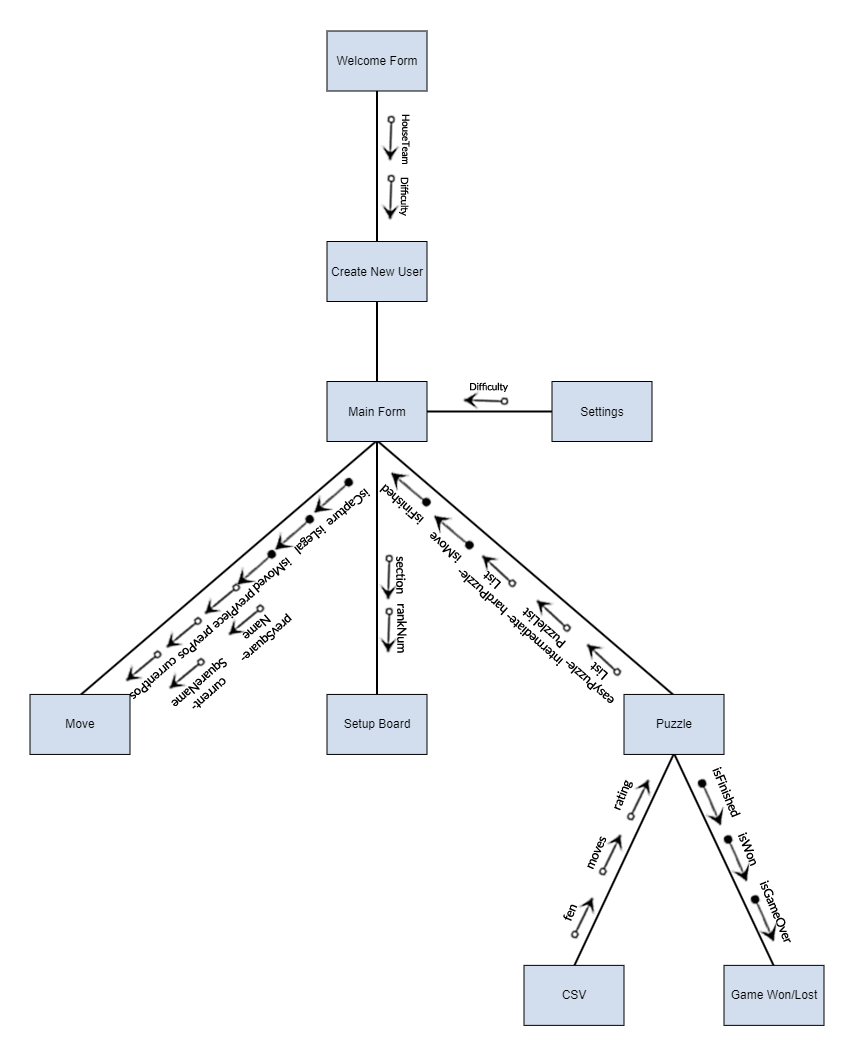
<style>
.page{position:relative;width:854px;height:1055px;background:#ffffff}
.page>*{position:absolute;margin:0}
.t1{font:10px "Lato-Regular";letter-spacing:-0.025em;color:#000000}
.t2{font:12.6px "Lato-Regular";letter-spacing:-0.025em;color:#000000}
</style>
<div class="page">
<p class="t1" style="left:402px;top:114px;width:8px;height:50px;rotate:90deg">HouseTeam</p>
<p class="t1" style="left:399px;top:177px;width:10px;height:39px;rotate:90deg">Difficulty</p>
<p class="t1" style="left:470px;top:382px;width:38px;height:10px">Difficulty</p>
<p class="t2" style="left:379px;top:484px;width:45px;height:41px;rotate:-139deg">isFinished</p>
<p class="t2" style="left:326px;top:488px;width:44px;height:37px;rotate:140deg">isCapture</p>
<p class="t2" style="left:294px;top:525px;width:32px;height:30px;rotate:140deg">isLegal</p>
<p class="t2" style="left:430px;top:532px;width:32px;height:31px;rotate:-139deg">isMove</p>
<p class="t2" style="left:252px;top:557px;width:40px;height:36px;rotate:140deg">isMoved</p>
<p class="t2" style="left:396px;top:556px;width:10px;height:38px;rotate:90deg">section</p>
<p class="t2" style="left:458px;top:570px;width:50px;height:46px;text-align:center;rotate:-139deg">hardPuzzle-<br>List</p>
<p class="t2" style="left:212px;top:588px;width:44px;height:40px;rotate:139deg">prevPiece</p>
<p class="t2" style="left:397px;top:604px;width:10px;height:49px;rotate:90deg">rankNum</p>
<p class="t2" style="left:241px;top:613px;width:51px;height:47px;text-align:center;rotate:139deg">prevSquare-<br>Name</p>
<p class="t2" style="left:507px;top:607px;width:59px;height:59px;text-align:center;rotate:-139deg">intermediate-<br>PuzzleList</p>
<p class="t2" style="left:178px;top:624px;width:36px;height:35px;rotate:139deg">prevPos</p>
<p class="t2" style="left:130px;top:657px;width:46px;height:42px;rotate:139deg">currentPos</p>
<p class="t2" style="left:171px;top:658px;width:56px;height:51px;text-align:center;rotate:139deg">current-<br>SquareName</p>
<p class="t2" style="left:565px;top:661px;width:49px;height:42px;text-align:center;rotate:-139deg">easyPuzzle-<br>List</p>
<p class="t2" style="left:712px;top:767px;width:29px;height:51px;rotate:67deg">isFinished</p>
<p class="t2" style="left:614px;top:779px;width:19px;height:32px;rotate:-68deg">rating</p>
<p class="t2" style="left:738px;top:832px;width:18px;height:34px;rotate:67deg">isWon</p>
<p class="t2" style="left:587px;top:836px;width:20px;height:34px;rotate:-66deg">moves</p>
<p class="t2" style="left:759px;top:880px;width:32px;height:63px;rotate:67deg">isGameOver</p>
<p class="t2" style="left:563px;top:904px;width:15px;height:17px;rotate:-68deg">fen</p>
</div>
